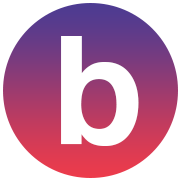
<style>
.page{position:relative;width:181px;height:181px;background:#ffffff}
.page>*{position:absolute;margin:0}
.t1{font:150px "Helvetica-Bold";color:#ffffff}
</style>
<div class="page">
<p class="t1" style="left:61px;top:36px;width:78px;height:110px">b</p>
</div>
